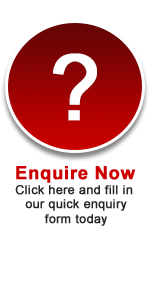
<style>
.page{position:relative;width:150px;height:292px;background:#ffffff}
.page>*{position:absolute;margin:0}
.t1{font:90px "ArialMT";letter-spacing:0.025em;color:#ffffff;font-weight:bold}
.t2{font:18px "Arial-BoldMT";letter-spacing:0.025em;color:#cc0000;font-weight:bold}
.t3{font:12px "ArialMT";letter-spacing:0.025em;color:#282828;font-weight:bold}
</style>
<div class="page">
<p class="t1" style="left:53px;top:53px;width:44px;height:68px">?</p>
<p class="t2" style="left:16px;top:166px;width:120px;height:17px">Enquire Now</p>
<p class="t3" style="left:15px;top:185px;width:118px;height:41px;text-align:center">Click here and fill in <br>our quick enquiry<br>form today</p>
</div>
